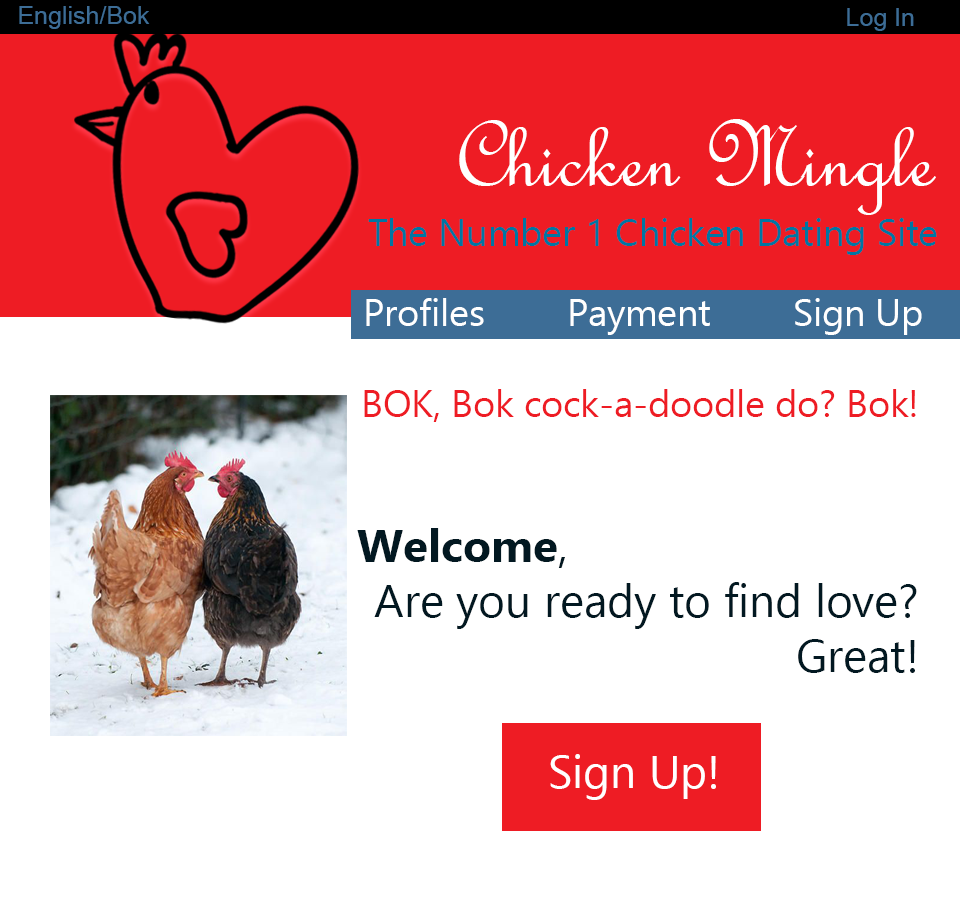
<style>
.page{position:relative;width:960px;height:911px;background:#ffffff}
.page>*{position:absolute;margin:0}
.t1{font:25px "ArialMT";color:#3d6d96}
.t2{font:100px "FrenchScriptMT";color:#ffffff}
.t3{font:37.5px "Ebrima";color:#0076a3}
.t4{font:37.5px "Ebrima";color:#ffffff}
.t5{font:45.8px "Ebrima";color:#021821}
.t6{font:37.5px "Ebrima";color:#ee1c24}
.t7{font:45.8px "Ebrima-Bold";color:#021821}
.t8{font:45.8px "Ebrima";color:#ffffff}
</style>
<div class="page">
<p class="t1" style="left:19px;top:6px;width:131px;height:23px">English/Bok</p>
<p class="t1" style="left:847px;top:8px;width:67px;height:23px">Log In</p>
<p class="t2" style="left:459px;top:119px;width:477px;height:96px">Chicken Mingle</p>
<p class="t3" style="left:368px;top:218px;width:569px;height:37px">The Number 1 Chicken Dating Site</p>
<p class="t4" style="left:366px;top:298px;width:556px;height:37px">Profiles        Payment        Sign Up</p>
<p class="t5" style="left:357px;top:389px;width:560px;height:284px;text-align:right"><span class="t6">BOK, Bok cock-a-doodle do? Bok!<br><br><br></span><span class="t7">Welcome</span>, <br>Are you ready to find love?<br>Great!</p>
<p class="t8" style="left:550px;top:754px;width:166px;height:46px">Sign Up!</p>
</div>
